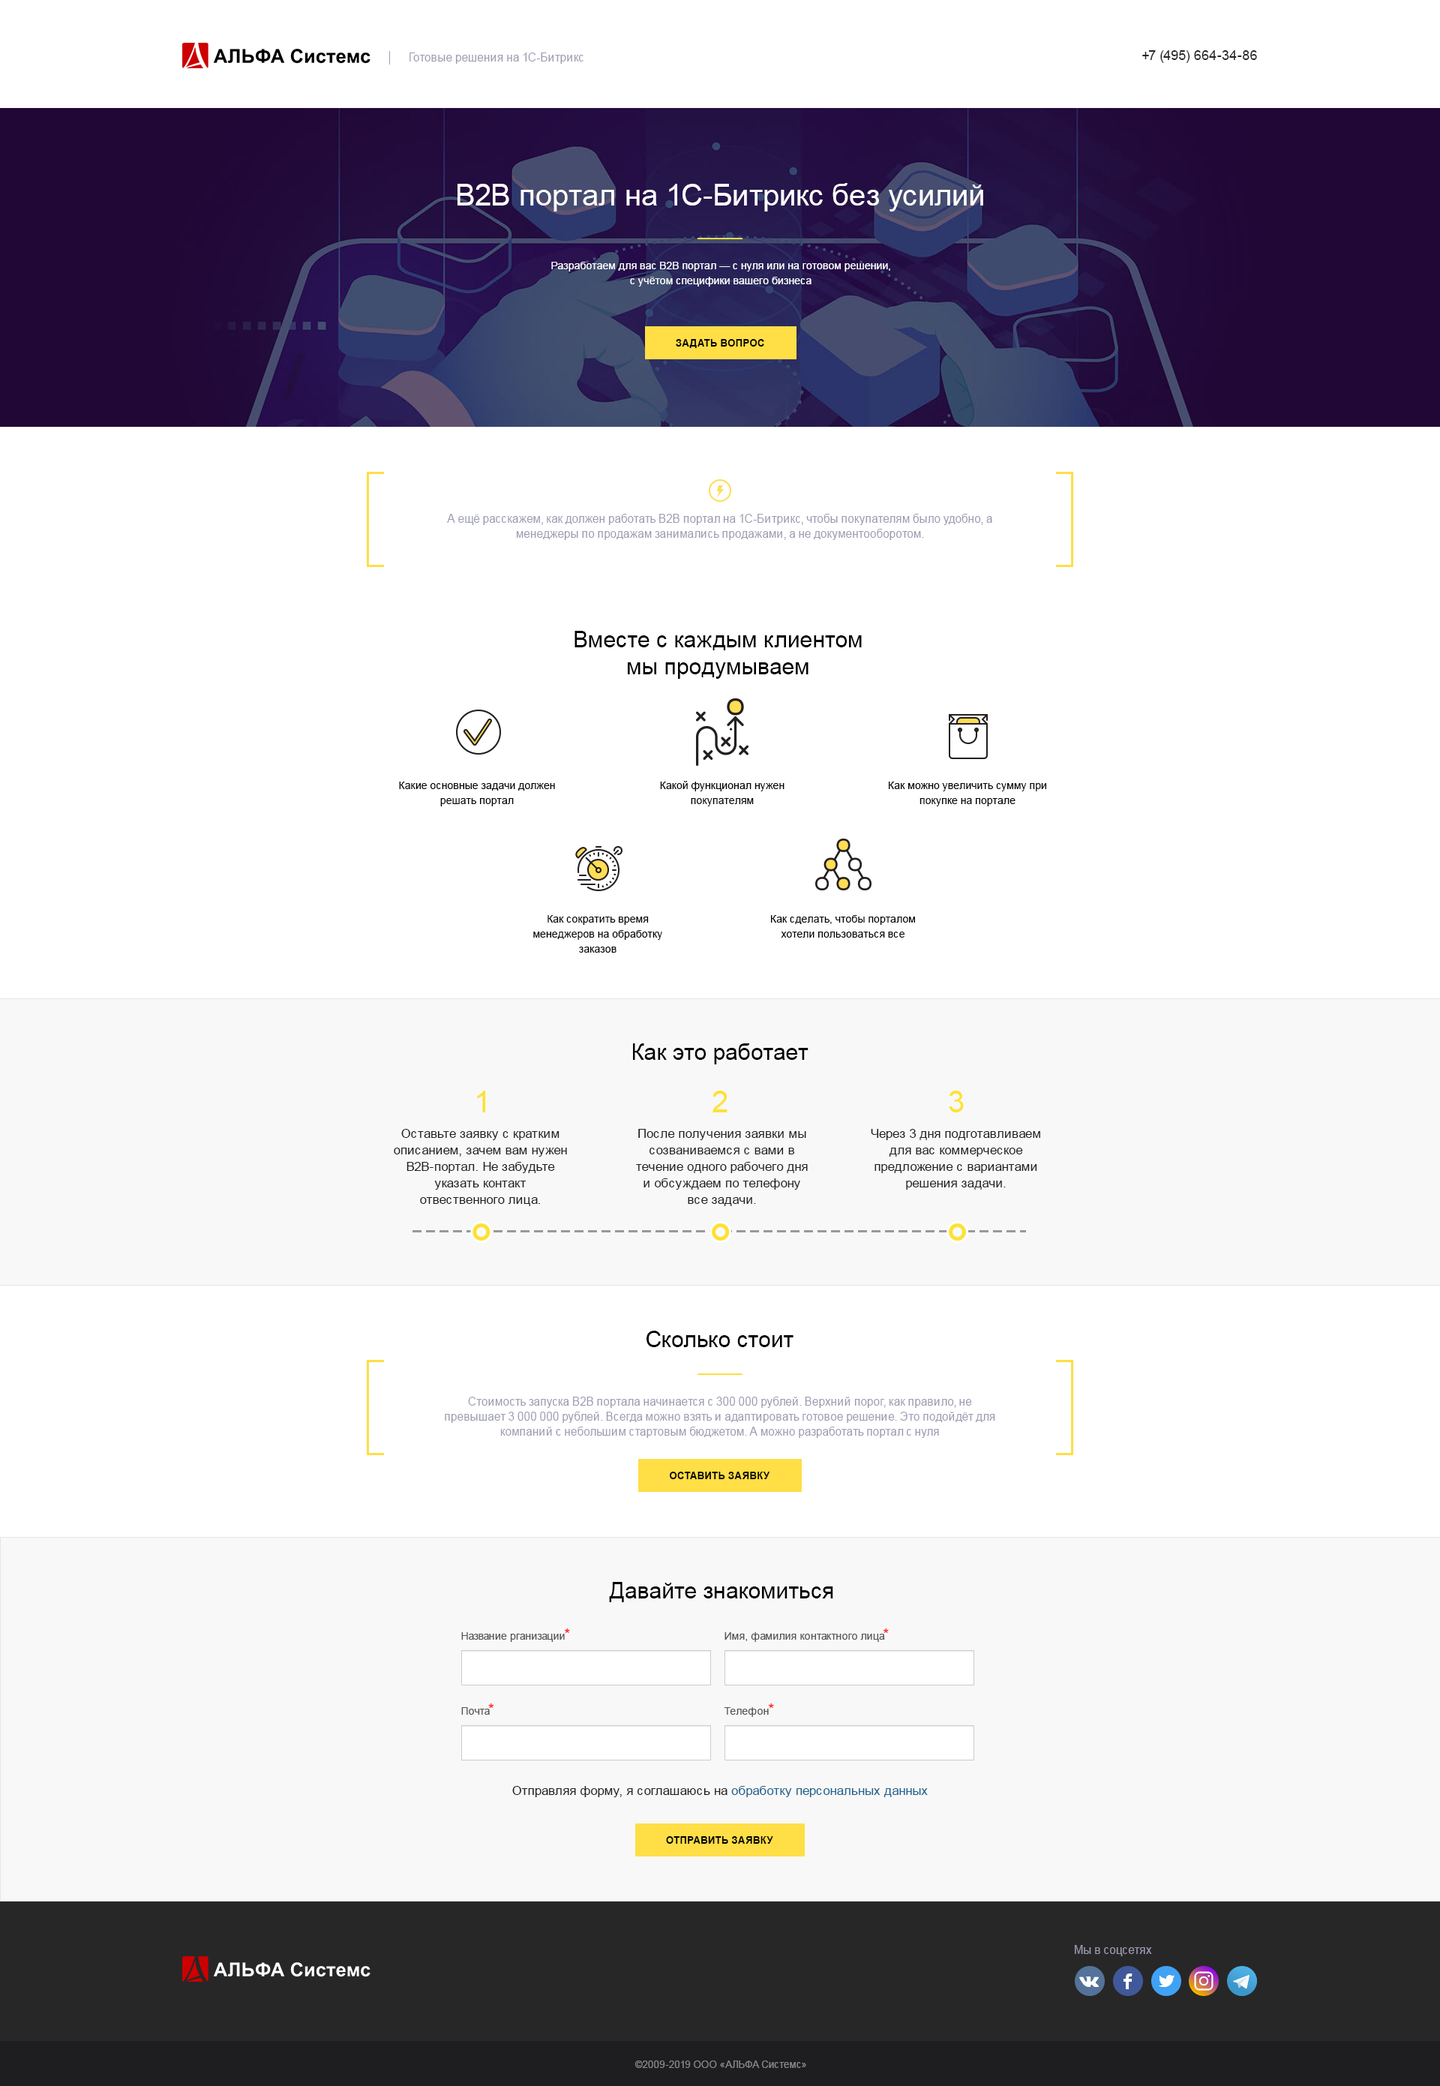
<style>
.page{position:relative;width:1440px;height:2086px;background:#ffffff}
.page>*{position:absolute;margin:0}
.t1{font:12px "MyriadPro-Regular";color:#9b9cb1;scale:0.94 1}
.t2{font:13.5px "MyriadPro-Regular";color:#262626}
.t3{font:9px "MyriadPro-Regular";color:#ffffff}
.t4{font:9px "Arial-BoldMT";letter-spacing:0.02em;color:#000000;text-transform:uppercase;scale:0.94 1}
.t5{font:9px "MyriadPro-Regular";color:#000000}
.t6{font:30px "ArialMT";color:#fee133}
.t7{font:9px "MyriadPro-Regular";color:#202020}
.t8{font:10.5px "MyriadPro-Regular";color:#555555}
.t9{font:15px "MyriadPro-Regular";color:#ff0000}
.t10{font:12.8px "MyriadPro-Regular";color:#202020}
.t11{font:12.8px "MyriadPro-Regular";color:#1c608d}
.t12{font:10.5px "MyriadPro-Regular";color:#888889;scale:0.94 1}
</style>
<div class="page">
<p class="t1" style="left:410px;top:52px;width:174px;height:12px">Готовые решения на 1С-Битрикс</p>
<p class="t2" style="left:1142px;top:50px;width:115px;height:13px">+7 (495) 664-34-86</p>
<p class="t3" style="left:458px;top:183px;width:525px;height:29px;text-align:center">B2B портал на 1С-Битрикс без усилий</p>
<p class="t3" style="left:551px;top:262px;width:339px;height:24px;text-align:center">Разработаем для вас B2B портал — с нуля или на готовом решении,<br>с учётом специфики вашего бизнеса</p>
<p class="t4" style="left:676px;top:339px;width:88px;height:9px">Задать вопрос</p>
<p class="t1" style="left:447px;top:514px;width:545px;height:26px;text-align:center">А ещё расскажем, как должен работать B2B портал на 1С-Битрикс, чтобы покупателям было удобно, а<br>менеджеры по продажам занимались продажами, а не документооборотом.</p>
<p class="t5" style="left:574px;top:631px;width:288px;height:48px;text-align:center">Вместе с каждым клиентом<br>мы продумываем</p>
<p class="t5" style="left:399px;top:782px;width:156px;height:24px;text-align:center">Какие основные задачи должен<br>решать портал</p>
<p class="t5" style="left:660px;top:781px;width:124px;height:25px;text-align:center">Какой функционал нужен<br>покупателям</p>
<p class="t5" style="left:889px;top:782px;width:157px;height:24px;text-align:center">Как можно увеличить сумму при<br>покупке на портале</p>
<p class="t5" style="left:533px;top:915px;width:129px;height:37px;text-align:center">Как сократить время<br>менеджеров на обработку<br>заказов</p>
<p class="t5" style="left:771px;top:915px;width:144px;height:23px;text-align:center">Как сделать, чтобы порталом<br>хотели пользоваться все</p>
<p class="t5" style="left:633px;top:1043px;width:175px;height:21px;text-align:center">Как это работает</p>
<p class="t6" style="left:477px;top:1090px;width:8px;height:22px">1</p>
<p class="t6" style="left:712px;top:1090px;width:16px;height:22px">2</p>
<p class="t6" style="left:949px;top:1090px;width:15px;height:22px">3</p>
<p class="t7" style="left:394px;top:1129px;width:173px;height:77px;text-align:center">Оставьте заявку с кратким описанием, зачем вам нужен B2B-портал. Не забудьте указать контакт отвественного лица.</p>
<p class="t7" style="left:636px;top:1129px;width:172px;height:77px;text-align:center">После получения заявки мы созваниваемся с вами в течение одного рабочего дня и обсуждаем по телефону все задачи.</p>
<p class="t7" style="left:871px;top:1129px;width:169px;height:61px;text-align:center">Через 3 дня подготавливаем для вас коммерческое предложение с вариантами решения задачи.</p>
<p class="t5" style="left:646px;top:1330px;width:148px;height:17px;text-align:center">Сколько стоит</p>
<p class="t1" style="left:445px;top:1396px;width:550px;height:42px;text-align:center">Стоимость запуска B2B портала начинается с 300 000 рублей. Верхний порог, как правило, не превышает 3 000 000 рублей. Всегда можно взять и адаптировать готовое решение. Это подойдёт для компаний с небольшим стартовым бюджетом. А можно разработать портал с нуля</p>
<p class="t4" style="left:670px;top:1472px;width:100px;height:7px">оставить заявку</p>
<p class="t5" style="left:609px;top:1582px;width:224px;height:20px;text-align:center">Давайте знакомиться</p>
<p class="t8" style="left:461px;top:1628px;width:109px;height:14px">Название рганизации<span class="t9">*</span></p>
<p class="t8" style="left:724px;top:1628px;width:165px;height:14px">Имя, фамилия контактного лица<span class="t9">*</span></p>
<p class="t8" style="left:461px;top:1703px;width:33px;height:11px">Почта<span class="t9">*</span></p>
<p class="t8" style="left:724px;top:1703px;width:50px;height:14px">Телефон<span class="t9">*</span></p>
<p class="t10" style="left:512px;top:1786px;width:416px;height:11px">Отправляя форму, я соглашаюсь на <span class="t11">обработку персональных данных</span></p>
<p class="t4" style="left:666px;top:1836px;width:107px;height:8px">отправить заявку</p>
<p class="t1" style="left:1075px;top:1945px;width:77px;height:11px">Мы в соцсетях</p>
<p class="t12" style="left:634px;top:2060px;width:172px;height:8px">©2009-2019 ООО «АЛЬФА Системс»</p>
</div>
